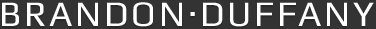
<style>
.page{position:relative;width:376px;height:29px;background:#333333}
.page>*{position:absolute;margin:0}
.t1{font:36px "Play";letter-spacing:0.08em;color:#ffffff}
</style>
<div class="page">
<p class="t1" style="left:2px;top:2px;width:372px;height:25px">BRANDON.DUFFANY</p>
</div>
